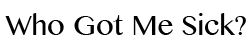
<style>
.page{position:relative;width:250px;height:50px;background:#ffffff}
.page>*{position:absolute;margin:0}
.t1{font:28px "GurmukhiMN";color:#000000}
</style>
<div class="page">
<p class="t1" style="left:5px;top:13px;width:241px;height:22px">Who Got Me Sick?</p>
</div>
